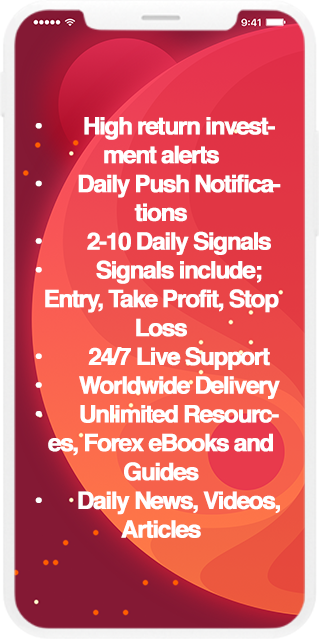
<style>
.page{position:relative;width:319px;height:639px}
.page>*{position:absolute;margin:0}
.t1{font:24px "Helvetica-Bold";letter-spacing:-0.075em;color:#ffffff;font-weight:bold}
</style>
<div class="page">
<p class="t1" style="left:35px;top:117px;width:246px;height:421px;text-align:center">• High return investment alerts<br>• Daily Push Notifications<br>• 2-10 Daily Signals<br>• Signals include; Entry, Take Profit, Stop Loss<br>• 24/7 Live Support<br>• Worldwide Delivery<br>• Unlimited Resources, Forex eBooks and Guides<br>• Daily News, Videos, Articles</p>
</div>
